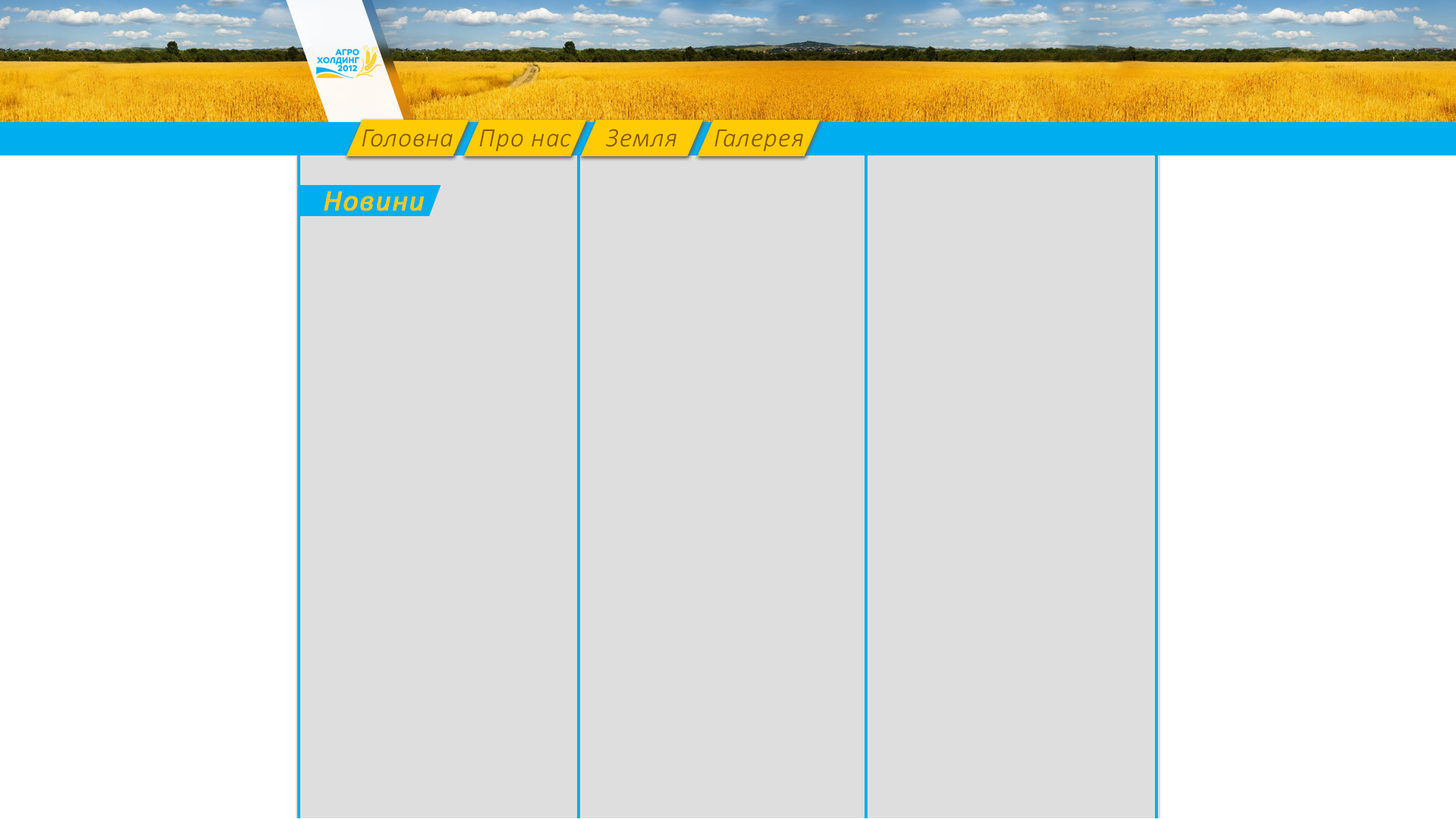
<style>
.page{position:relative;width:1456px;height:819px;background:#dedede}
.page>*{position:absolute;margin:0}
.t1{font:26.7px "Calibri-LightItalic";letter-spacing:0.025em;color:#815601}
.t2{font:29.3px "Calibri-Italic";letter-spacing:0.025em;color:#ffcb05;font-weight:bold}
</style>
<div class="page">
<p class="t1" style="left:362px;top:129px;width:91px;height:18px">Головна</p>
<p class="t1" style="left:479px;top:129px;width:92px;height:23px">Про нас</p>
<p class="t1" style="left:606px;top:129px;width:70px;height:18px">Земля</p>
<p class="t1" style="left:714px;top:129px;width:89px;height:23px">Галерея</p>
<p class="t2" style="left:324px;top:191px;width:100px;height:20px">Новини</p>
</div>
